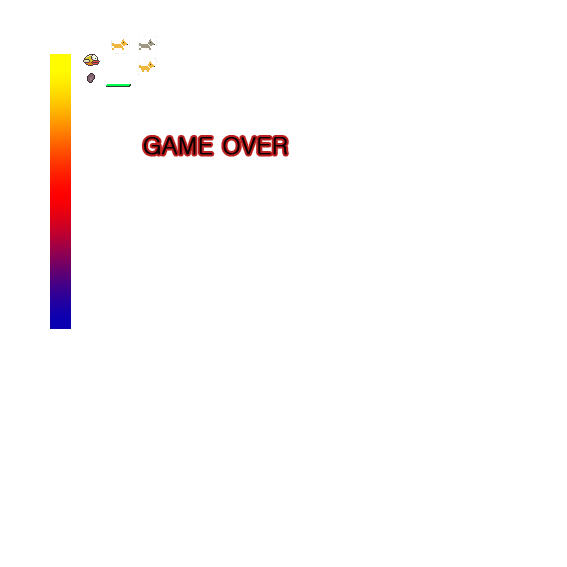
<style>
.page{position:relative;width:567px;height:567px;background:#ffffff}
.page>*{position:absolute;margin:0}
.t1{font:24px "Gulim";color:#000000;font-weight:bold}
</style>
<div class="page">
<p class="t1" style="left:143px;top:137px;width:144px;height:18px">GAME OVER</p>
</div>
